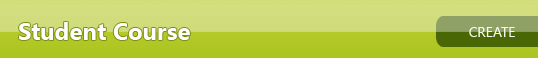
<style>
.page{position:relative;width:538px;height:58px}
.page>*{position:absolute;margin:0}
.t1{font:24px "SegoeUI-Bold";color:#fefefe}
.t2{font:14px "SegoeUI";color:#f6f7f1}
</style>
<div class="page">
<p class="t1" style="left:19px;top:22px;width:171px;height:18px">Student Course</p>
<p class="t2" style="left:469px;top:27px;width:46px;height:10px">CREATE</p>
</div>
